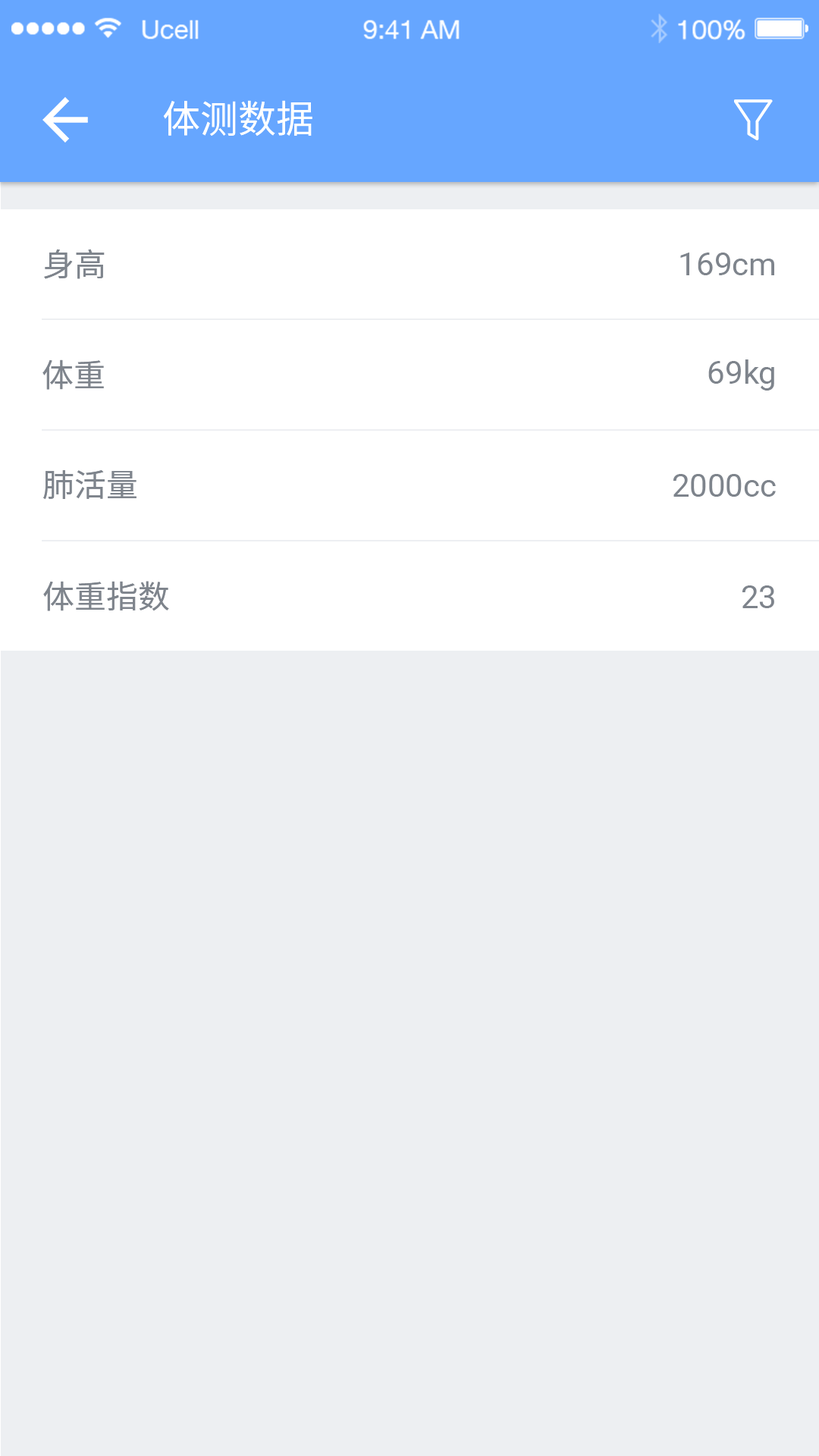
<style>
.page{position:relative;width:819px;height:1456px;background:#edeff2}
.page>*{position:absolute;margin:0}
.t1{font:37.9px "NotoSansHans-Regular";color:#ffffff}
.t2{font:31.8px "NotoSansHans-Regular";color:#7e848c}
.t3{font:31.8px "Roboto-Regular";color:#7e848c}
</style>
<div class="page">
<p class="t1" style="left:163px;top:100px;width:149px;height:36px">体测数据</p>
<p class="t2" style="left:44px;top:249px;width:61px;height:30px">身高</p>
<p class="t3" style="left:680px;top:253px;width:94px;height:22px">169cm</p>
<p class="t2" style="left:42px;top:359px;width:62px;height:31px">体重</p>
<p class="t3" style="left:708px;top:359px;width:66px;height:32px">69kg</p>
<p class="t2" style="left:43px;top:470px;width:93px;height:30px">肺活量</p>
<p class="t3" style="left:673px;top:474px;width:103px;height:23px">2000cc</p>
<p class="t2" style="left:43px;top:581px;width:126px;height:30px">体重指数</p>
<p class="t3" style="left:742px;top:585px;width:32px;height:23px">23</p>
</div>
